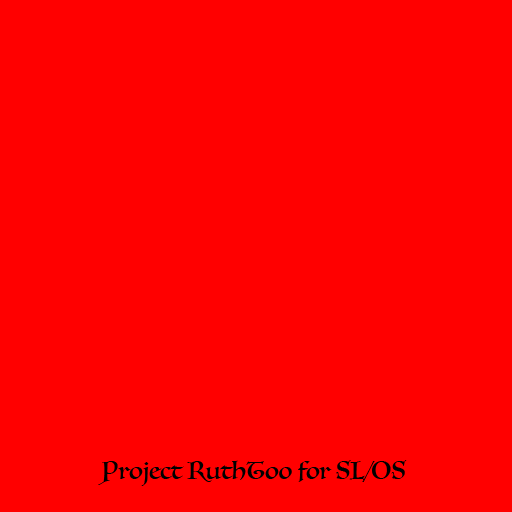
<style>
.page{position:relative;width:512px;height:512px;background:#ff0000}
.page>*{position:absolute;margin:0}
.t1{font:24px "Luminari-Regular";color:#000000}
</style>
<div class="page">
<p class="t1" style="left:98px;top:460px;width:309px;height:26px">Project RuthToo for SL/OS</p>
</div>
